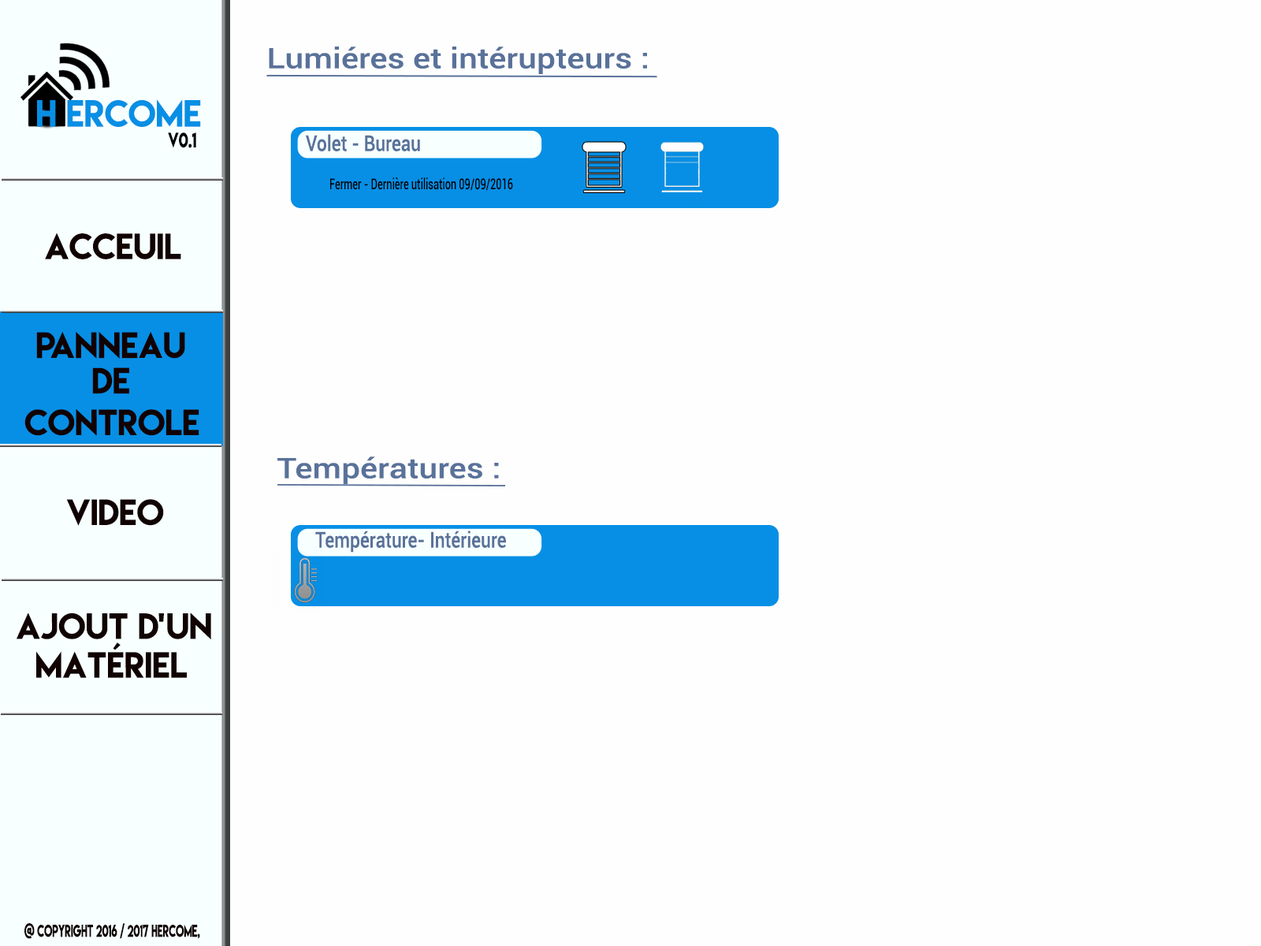
<style>
.page{position:relative;width:1261px;height:946px;background:#fffefe}
.page>*{position:absolute;margin:0}
.t1{font:28.4px "Roboto-Medium";color:#59729a;scale:1.17 1}
.t2{font:33.5px "LemonMilk";color:#078fe5}
.t3{font:18.7px "LemonMilk";color:#000000;scale:0.78 1}
.t4{font:21.7px "Roboto-Medium";color:#59729a;scale:0.83 1}
.t5{font:14.7px "Roboto-Medium";color:#000000;scale:0.69 1}
.t6{font:32.3px "LemonMilk";color:#110202}
.t7{font:15.1px "LemonMilk";color:#110202;scale:0.64 1}
</style>
<div class="page">
<p class="t1" style="left:269px;top:46px;width:378px;height:28px">Lumiéres et intérupteurs :</p>
<p class="t2" style="left:37px;top:99px;width:164px;height:28px">H ercome</p>
<p class="t3" style="left:168px;top:132px;width:28px;height:16px">v0.1</p>
<p class="t4" style="left:306px;top:134px;width:114px;height:17px">Volet - Bureau</p>
<p class="t5" style="left:330px;top:177px;width:183px;height:14px">Fermer - Dernière utilisation 09/09/2016</p>
<p class="t6" style="left:45px;top:232px;width:136px;height:27px">Acceuil</p>
<p class="t6" style="left:36px;top:332px;width:149px;height:27px">panneau</p>
<p class="t6" style="left:92px;top:367px;width:37px;height:27px">DE</p>
<p class="t6" style="left:24px;top:409px;width:175px;height:27px">CONTROLE</p>
<p class="t1" style="left:277px;top:456px;width:222px;height:28px">Températures :</p>
<p class="t6" style="left:66px;top:499px;width:98px;height:27px">Video</p>
<p class="t4" style="left:315px;top:530px;width:191px;height:22px">Température- Intérieure</p>
<p class="t6" style="left:17px;top:612px;width:194px;height:66px">Ajout d’un<br>  Matériel</p>
<p class="t7" style="left:24px;top:923px;width:176px;height:16px">@ Copyright 2016 / 2017 Hercome,</p>
</div>
